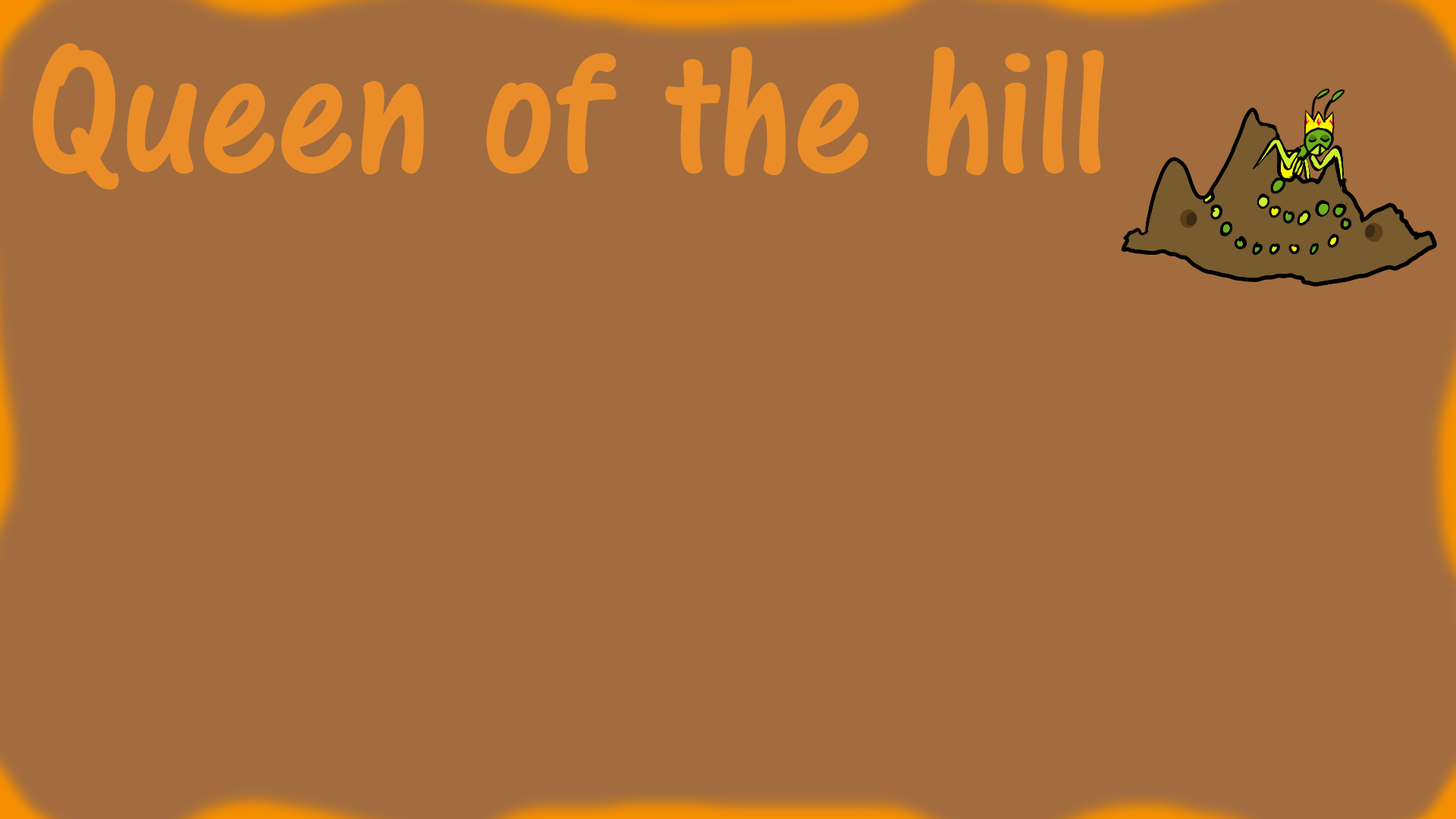
<style>
.page{position:relative;width:1456px;height:819px;background:#a26c3f}
.page>*{position:absolute;margin:0}
.t1{font:189.6px "ARCENA";color:#ea8d29}
</style>
<div class="page">
<p class="t1" style="left:33px;top:43px;width:1071px;height:147px">Queen of the hill</p>
</div>
